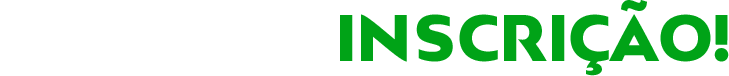
<style>
.page{position:relative;width:729px;height:76px;background:#ffffff}
.page>*{position:absolute;margin:0}
.t1{font:62.1px "BwMitga-Black";color:#00a317;text-transform:uppercase}
.t2{font:62.1px "BwMitga-Black";color:#ffffff;text-transform:uppercase}
</style>
<div class="page">
<p class="t1" style="left:1px;top:0px;width:728px;height:76px"><span class="t2">Faça Sua</span> Inscrição!</p>
</div>
